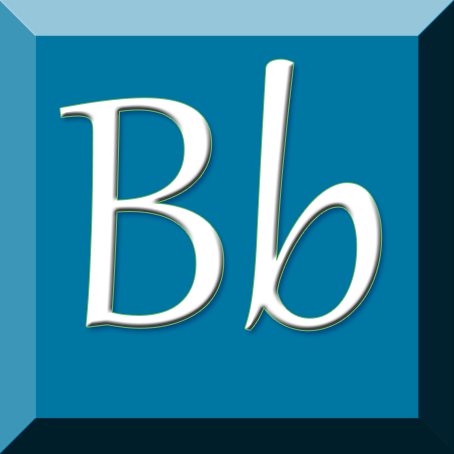
<style>
.page{position:relative;width:454px;height:454px;background:#0076a3}
.page>*{position:absolute;margin:0}
.t1{font:400px "Gabriola";color:#ffffff}
</style>
<div class="page">
<p class="t1" style="left:60px;top:59px;width:322px;height:272px">Bb</p>
</div>
